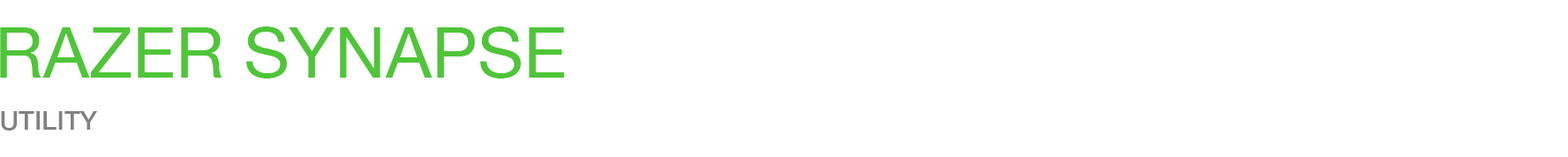
<style>
.page{position:relative;width:1568px;height:157px;background:#ffffff}
.page>*{position:absolute;margin:0}
.t1{font:70.6px "HelveticaNeue";color:#50c639;text-transform:uppercase}
.t2{font:26.5px "HelveticaNeue-Medium";color:#818181;text-transform:uppercase}
</style>
<div class="page">
<p class="t1" style="left:0px;top:26px;width:564px;height:53px">razer synapse</p>
<p class="t2" style="left:1px;top:111px;width:97px;height:20px">utility</p>
<p class="t2" style="left:1px;top:111px;width:97px;height:20px">utility</p>
<p class="t2" style="left:1px;top:111px;width:97px;height:20px">utility</p>
<p class="t2" style="left:1px;top:111px;width:97px;height:20px">UTILITY</p>
<p class="t2" style="left:1px;top:111px;width:97px;height:20px">UTILITY</p>
<p class="t2" style="left:1px;top:111px;width:97px;height:20px">utility</p>
<p class="t2" style="left:1px;top:111px;width:97px;height:20px">utility</p>
</div>
